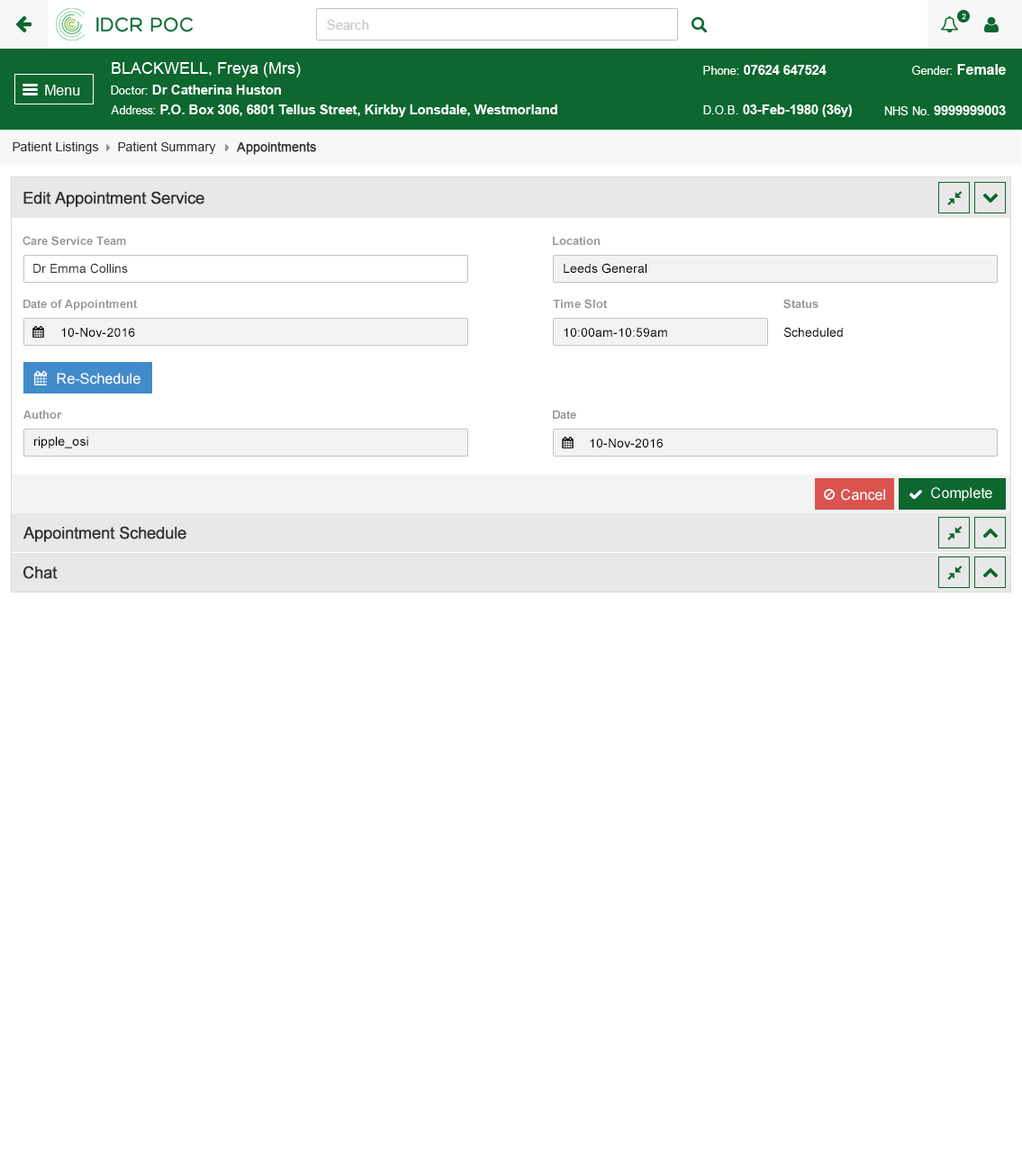
<style>
.page{position:relative;width:1022px;height:1167px;background:#ffffff}
.page>*{position:absolute;margin:0}
.t1{font:12.6px "ArialMT";color:#313131}
.t2{font:12.6px "ArialMT";color:#313131;font-weight:bold}
.t3{font:16.2px "ArialMT";color:#303030;font-weight:bold}
.t4{font:11.7px "Arial-BoldMT";color:#959595}
.t5{font:12.6px "ArialMT";color:#303030}
.t6{font:12.6px "ArialMT";color:#000000}
</style>
<div class="page">
<p class="t1" style="left:13px;top:141px;width:86px;height:13px">Patient Listings</p>
<p class="t1" style="left:118px;top:141px;width:98px;height:13px">Patient Summary</p>
<p class="t2" style="left:237px;top:141px;width:79px;height:14px">Appointments</p>
<p class="t3" style="left:23px;top:191px;width:181px;height:16px">Edit Appointment Service</p>
<p class="t4" style="left:23px;top:236px;width:103px;height:10px">Care Service Team</p>
<p class="t4" style="left:553px;top:236px;width:47px;height:9px">Location</p>
<p class="t5" style="left:33px;top:263px;width:95px;height:11px">Dr Emma Collins</p>
<p class="t6" style="left:564px;top:263px;width:82px;height:11px">Leeds General</p>
<p class="t4" style="left:23px;top:299px;width:115px;height:12px">Date of Appointment</p>
<p class="t4" style="left:553px;top:299px;width:55px;height:10px">Time Slot</p>
<p class="t4" style="left:783px;top:299px;width:35px;height:10px">Status</p>
<p class="t6" style="left:61px;top:328px;width:74px;height:9px">10-Nov-2016</p>
<p class="t6" style="left:564px;top:328px;width:103px;height:9px">10:00am-10:59am</p>
<p class="t6" style="left:783px;top:327px;width:60px;height:11px">Scheduled</p>
<p class="t4" style="left:23px;top:410px;width:39px;height:9px">Author</p>
<p class="t4" style="left:553px;top:410px;width:23px;height:9px">Date</p>
<p class="t6" style="left:34px;top:437px;width:54px;height:11px">ripple_osi</p>
<p class="t6" style="left:590px;top:438px;width:73px;height:9px">10-Nov-2016</p>
<p class="t3" style="left:23px;top:526px;width:163px;height:16px">Appointment Schedule</p>
<p class="t3" style="left:23px;top:565px;width:35px;height:14px">Chat</p>
</div>
